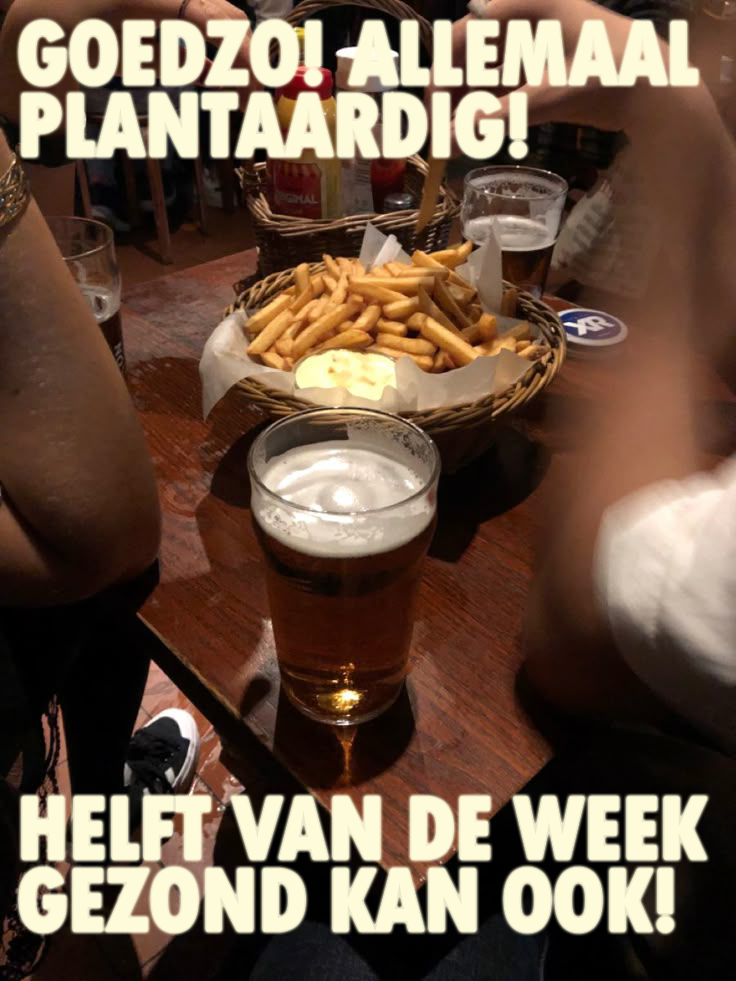
<style>
.page{position:relative;width:736px;height:981px}
.page>*{position:absolute;margin:0}
.t1{font:95px "TwCenMT-CondensedExtraBold";letter-spacing:-0.02em;color:#fefbda}
</style>
<div class="page">
<p class="t1" style="left:19px;top:21px;width:678px;height:136px">GOEDZO! ALLEMAAL PLANTAARDIG!</p>
<p class="t1" style="left:19px;top:797px;width:688px;height:135px">HELFT VAN DE WEEK GEZOND KAN OOK!</p>
</div>
